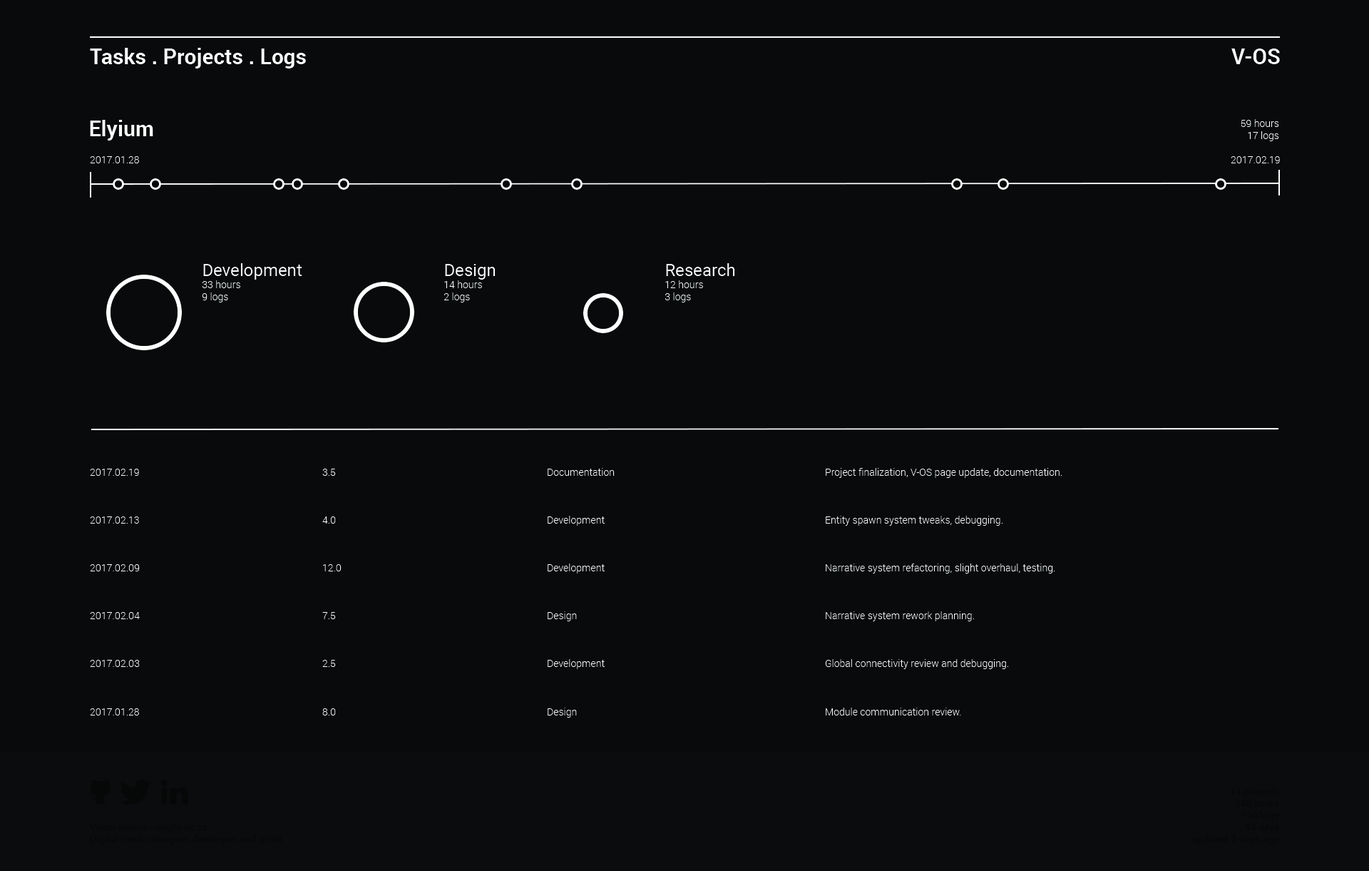
<style>
.page{position:relative;width:1369px;height:871px;background:#080a0b}
.page>*{position:absolute;margin:0}
.t1{font:21.4px "Roboto-Bold";color:#feffff}
.t2{font:10px "Roboto-Light";color:#ffffff}
.t3{font:10px "Roboto-Light";color:#feffff}
.t4{font:17.1px "Roboto-Regular";color:#feffff}
</style>
<div class="page">
<p class="t1" style="left:90px;top:48px;width:216px;height:20px">Tasks . Projects . Logs</p>
<p class="t1" style="left:1232px;top:48px;width:48px;height:16px">V-OS</p>
<p class="t1" style="left:90px;top:120px;width:63px;height:20px">Elyium</p>
<p class="t2" style="left:1241px;top:119px;width:38px;height:22px;text-align:right">59 hours<br>17 logs</p>
<p class="t3" style="left:90px;top:156px;width:49px;height:7px">2017.01.28</p>
<p class="t3" style="left:1231px;top:156px;width:49px;height:7px">2017.02.19</p>
<p class="t3" style="left:202px;top:263px;width:100px;height:39px"><span class="t4">Development<br></span>33 hours<br>9 logs</p>
<p class="t3" style="left:444px;top:264px;width:52px;height:38px"><span class="t4">Design<br></span>14 hours<br>2 logs</p>
<p class="t3" style="left:665px;top:263px;width:70px;height:39px"><span class="t4">Research<br></span>12 hours<br>3 logs</p>
<p class="t2" style="left:90px;top:469px;width:50px;height:246px">2017.02.19<br><br><br><br>2017.02.13<br><br><br><br>2017.02.09<br><br><br><br>2017.02.04<br><br><br><br>2017.02.03<br><br><br><br>2017.01.28</p>
<p class="t2" style="left:322px;top:469px;width:20px;height:246px">3.5<br><br><br><br>4.0<br><br><br><br>12.0<br><br><br><br>7.5<br><br><br><br>2.5<br><br><br><br>8.0</p>
<p class="t2" style="left:548px;top:468px;width:67px;height:249px">Documentation<br><br><br><br>Development<br><br><br><br>Development<br><br><br><br>Design<br><br><br><br>Development<br><br><br><br>Design</p>
<p class="t2" style="left:825px;top:468px;width:237px;height:247px">Project finalization, V-OS page update, documentation.<br><br><br><br>Entity spawn system tweaks, debugging.<br><br><br><br>Narrative system refactoring, slight overhaul, testing.<br><br><br><br>Narrative system rework planning.<br><br><br><br>Global connectivity review and debugging.<br><br><br><br>Module communication review.</p>
</div>
